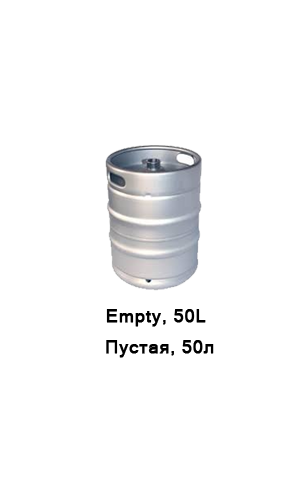
<style>
.page{position:relative;width:300px;height:500px;background:#ffffff}
.page>*{position:absolute;margin:0}
.t1{font:18px "MicrosoftSansSerif";color:#000000;font-weight:bold}
</style>
<div class="page">
<p class="t1" style="left:106px;top:309px;width:100px;height:18px">Empty, 50L</p>
<p class="t1" style="left:106px;top:340px;width:108px;height:18px">Пустая, 50л</p>
</div>
